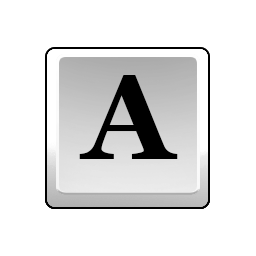
<style>
.page{position:relative;width:256px;height:256px;background:#ffffff}
.page>*{position:absolute;margin:0}
.t1{font:120px "Georgia-Bold";color:#000000;font-variant:small-caps}
</style>
<div class="page">
<p class="t1" style="left:79px;top:75px;width:99px;height:84px">A</p>
</div>
